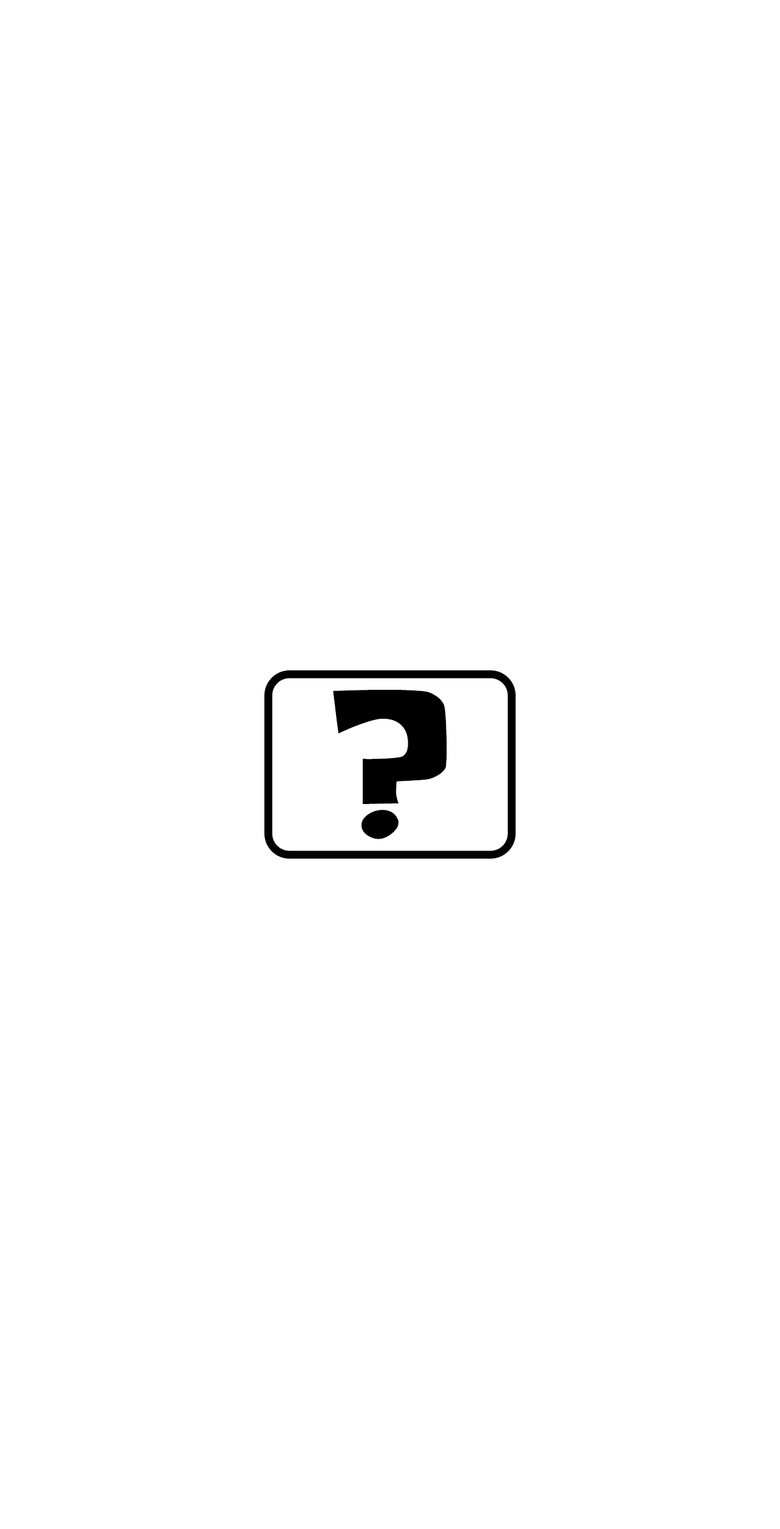
<style>
.page{position:relative;width:780px;height:1529px;background:#ffffff}
.page>*{position:absolute;margin:0}
.t1{font:188.3px "Slackey-Regular";color:#000000}
</style>
<div class="page">
<p class="t1" style="left:333px;top:690px;width:114px;height:149px">?</p>
</div>
